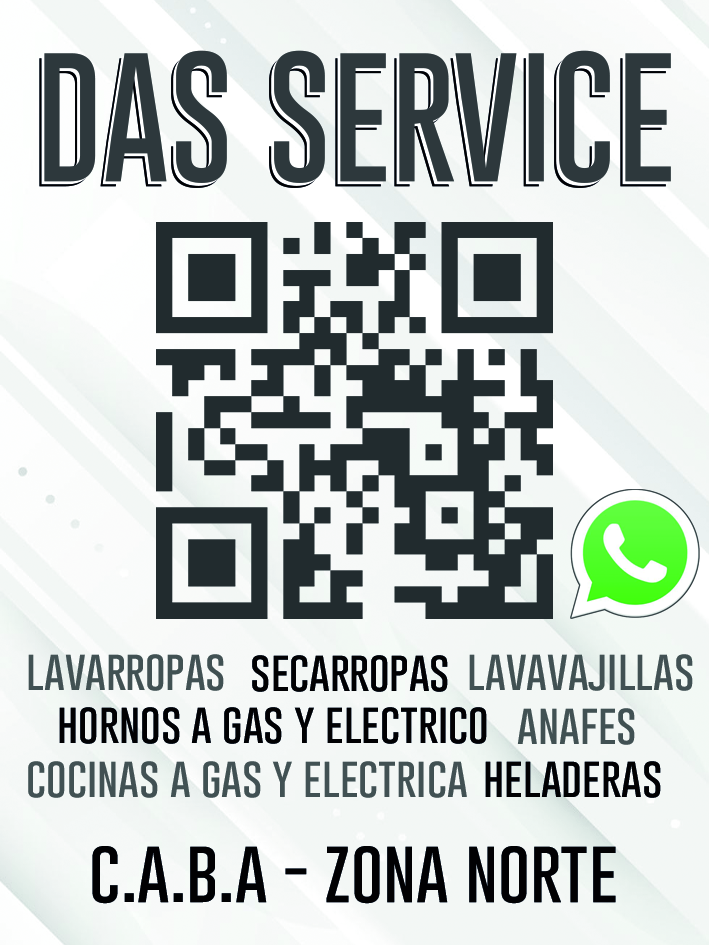
<style>
.page{position:relative;width:709px;height:945px}
.page>*{position:absolute;margin:0}
.t1{font:41.7px "GoboldThin";color:#415153}
.t2{font:41.7px "GoboldThin";color:#010102}
.t3{font:65.5px "GoboldThin";color:#010102}
</style>
<div class="page">
<p class="t1" style="left:28px;top:654px;width:196px;height:37px">lavarropas</p>
<p class="t1" style="left:469px;top:654px;width:224px;height:37px">lavavajillas</p>
<p class="t2" style="left:252px;top:655px;width:196px;height:37px">secarropas</p>
<p class="t2" style="left:59px;top:707px;width:428px;height:37px">hornos a gas y electrico</p>
<p class="t1" style="left:517px;top:708px;width:118px;height:37px">anafes</p>
<p class="t1" style="left:28px;top:761px;width:439px;height:37px">cocinas a gas y electrica</p>
<p class="t2" style="left:485px;top:761px;width:176px;height:37px">heladeras</p>
<p class="t3" style="left:92px;top:846px;width:524px;height:58px">c.a.b.a - zona norte</p>
</div>
